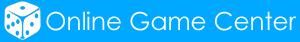
<style>
.page{position:relative;width:300px;height:42px;background:#00a8ff}
.page>*{position:absolute;margin:0}
.t1{font:24.6px "CenturyGothic";color:#ffffff}
</style>
<div class="page">
<p class="t1" style="left:46px;top:11px;width:251px;height:20px">Online Game Center</p>
</div>
